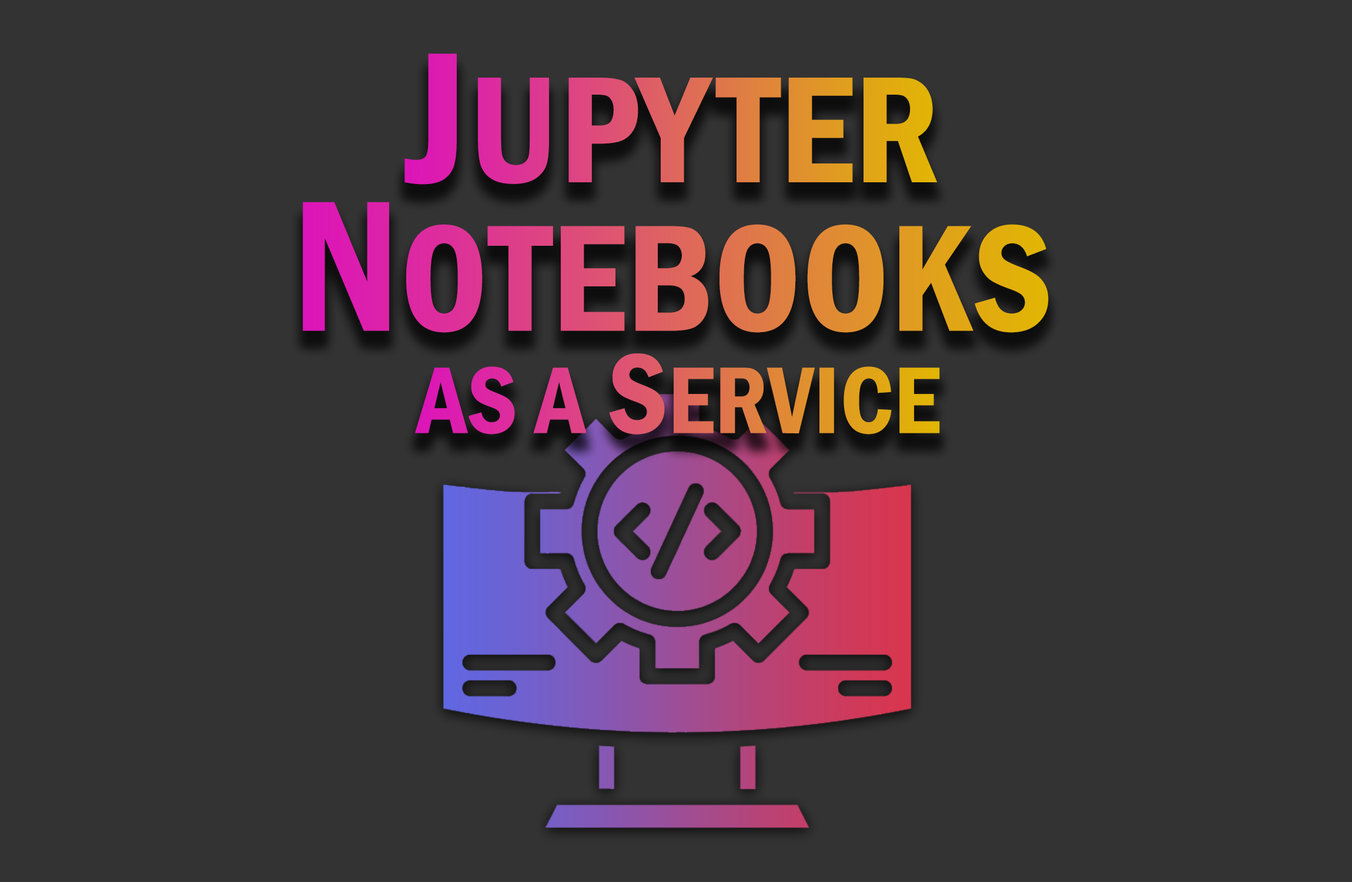
<style>
.page{position:relative;width:1352px;height:882px;background:#333333}
.page>*{position:absolute;margin:0}
.t1{font:156.8px "FranklinGothic-DemiCond"}
.t2{font:192.7px "FranklinGothic-DemiCond"}
.t3{font:98px "FranklinGothic-DemiCond"}
.t4{font:117.6px "FranklinGothic-DemiCond"}
</style>
<div class="page">
<p class="t1" style="left:404px;top:53px;width:534px;height:132px"><span class="t2">J</span>UPYTER</p>
<p class="t1" style="left:303px;top:202px;width:746px;height:131px"><span class="t2">N</span>OTEBOOKS</p>
<p class="t3" style="left:415px;top:353px;width:525px;height:81px">AS A<span class="t4"> S</span>ERVICE</p>
</div>
